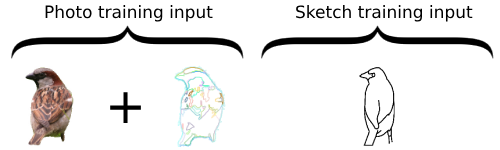
<style>
.page{position:relative;width:500px;height:150px;background:#ffffff}
.page>*{position:absolute;margin:0}
.t1{font:17px "DejaVuSans";color:#000000}
.t2{font:49px "DejaVuSans";color:#000000}
</style>
<div class="page">
<p class="t1" style="left:45px;top:5px;width:168px;height:17px">Photo training input</p>
<p class="t1" style="left:296px;top:5px;width:177px;height:17px">Sketch training input</p>
<p class="t2" style="left:110px;top:92px;width:31px;height:31px">+</p>
</div>
